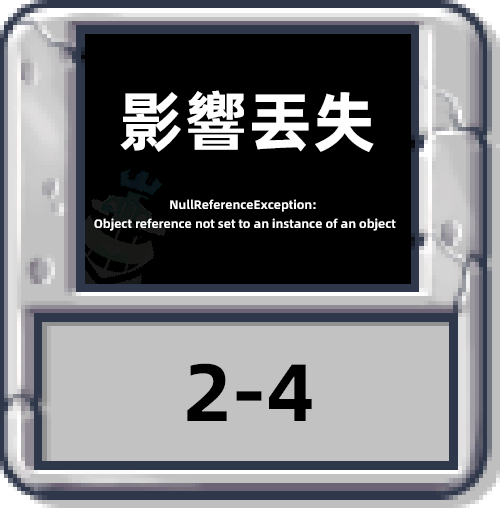
<style>
.page{position:relative;width:500px;height:508px;background:#000000}
.page>*{position:absolute;margin:0}
.t1{font:65.5px "AlibabaPuHuiTiB";color:#ffffff}
.t2{font:12.2px/19.2px "AlibabaPuHuiTiB";color:#ffffff}
.t3{font:81.4px "AlibabaPuHuiTiB";color:#000000}
</style>
<div class="page">
<p class="t1" style="left:120px;top:90px;width:254px;height:62px">影響丟失</p>
<p class="t2" style="left:94px;top:199px;width:302px;height:32px;text-align:center">NullReferenceException: <br>Object reference not set to an instance of an object</p>
<p class="t3" style="left:187px;top:363px;width:125px;height:58px">2-4</p>
</div>
